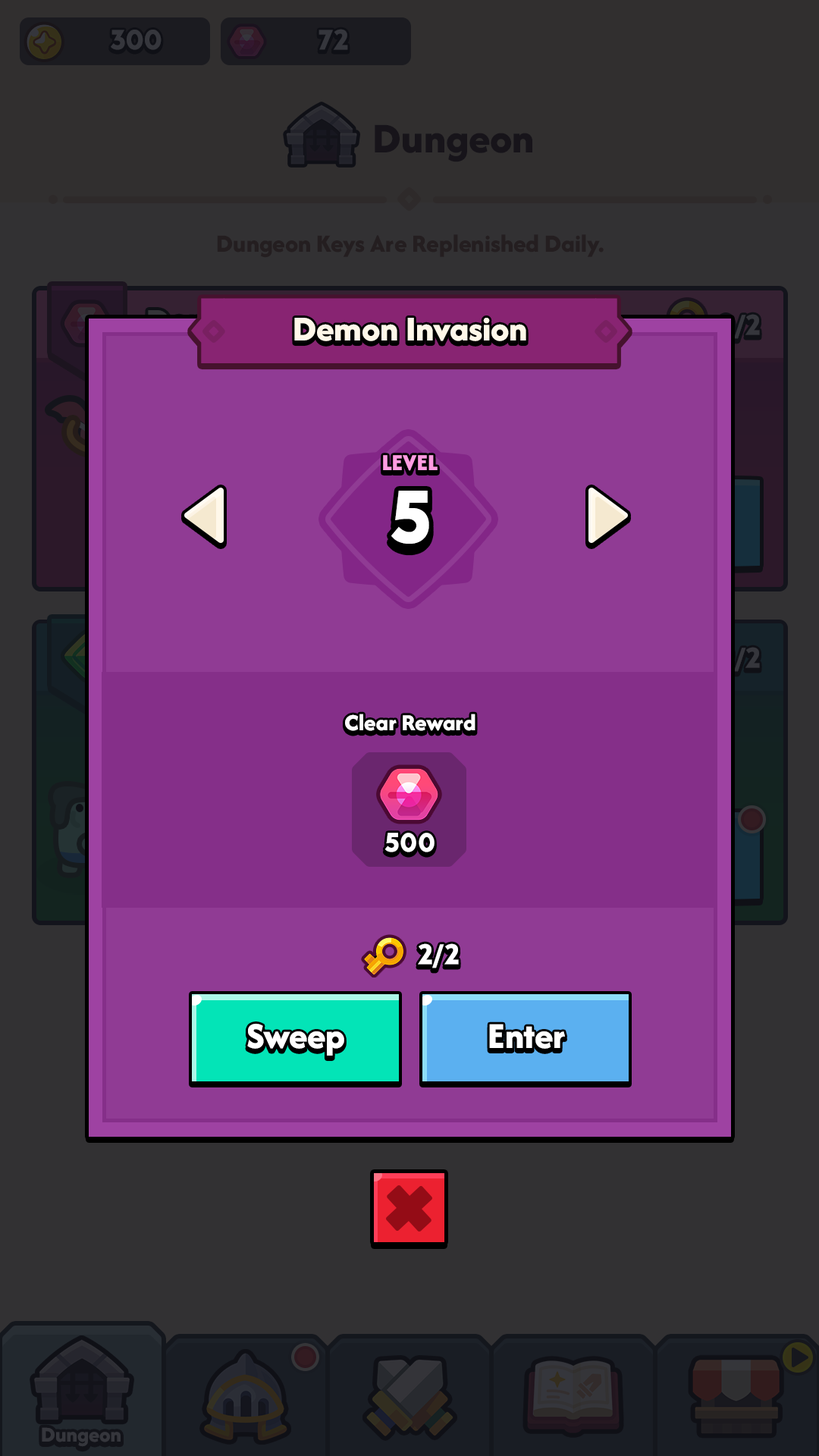
<style>
.page{position:relative;width:819px;height:1456px;background:#323133}
.page>*{position:absolute;margin:0}
.t1{font:36.4px "AfacadFlux-ExtraBold";color:#fff8e9}
.t2{font:24px "AfacadFlux-ExtraBold";color:#ff9de2;text-transform:uppercase}
.t3{font:78px "LTAvocado-Bold";color:#ffffff;text-transform:uppercase}
.t4{font:24px "AfacadFlux-ExtraBold";color:#ffffff}
.t5{font:28.4px "LTAvocado-Bold";color:#ffffff}
.t6{font:29.6px "LTAvocado-Bold";color:#ffffff}
.t7{font:37.9px "AfacadFlux-ExtraBold";color:#ffffff}
</style>
<div class="page">
<p class="t1" style="left:294px;top:318px;width:232px;height:23px">Demon Invasion</p>
<p class="t2" style="left:383px;top:455px;width:55px;height:16px">Level</p>
<p class="t3" style="left:391px;top:491px;width:38px;height:53px">5</p>
<p class="t4" style="left:345px;top:714px;width:130px;height:17px">Clear Reward</p>
<p class="t5" style="left:384px;top:833px;width:51px;height:19px">500</p>
<p class="t6" style="left:418px;top:943px;width:41px;height:25px">2/2</p>
<p class="t7" style="left:247px;top:1024px;width:97px;height:32px">Sweep</p>
<p class="t7" style="left:489px;top:1024px;width:76px;height:25px">Enter</p>
</div>
